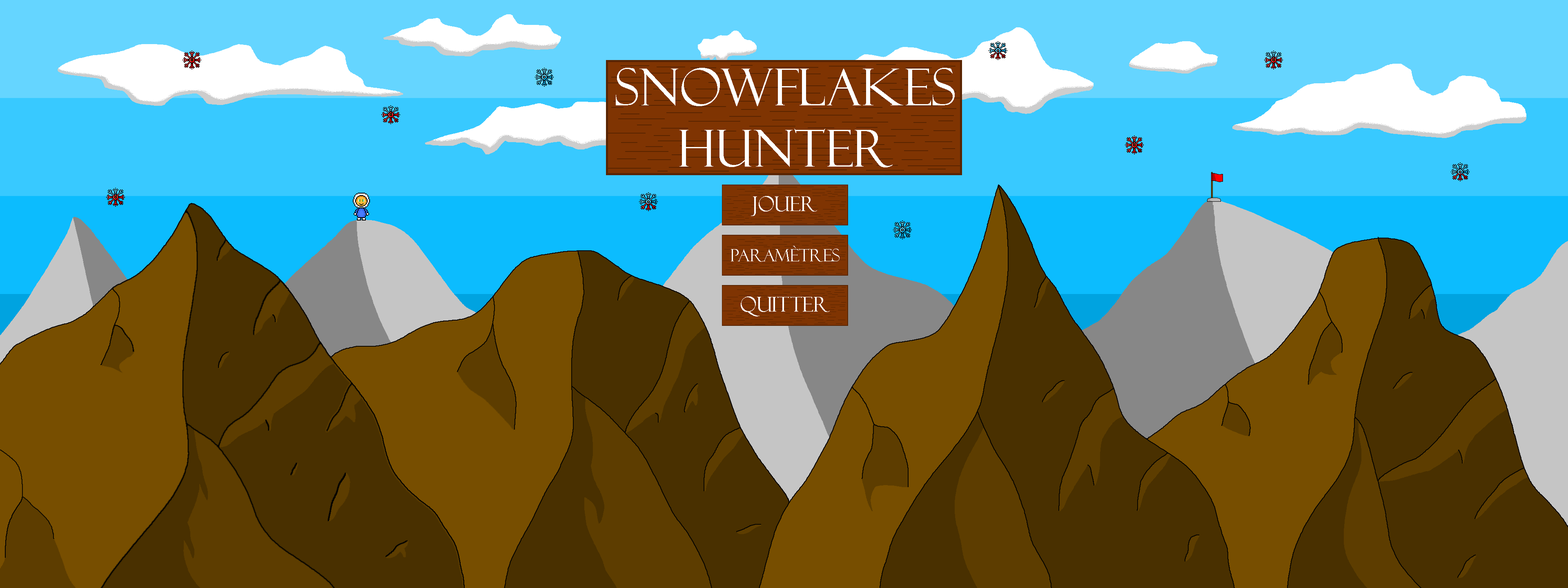
<style>
.page{position:relative;width:1568px;height:588px}
.page>*{position:absolute;margin:0}
.t1{font:51px "FelixTitlingMT";color:#ffffff}
.t2{font:20.4px "FelixTitlingMT";color:#ffffff}
.t3{font:17px "FelixTitlingMT";color:#ffffff}
</style>
<div class="page">
<p class="t1" style="left:616px;top:68px;width:339px;height:99px;text-align:center">Snowflakes<br>Hunter</p>
<p class="t2" style="left:751px;top:196px;width:66px;height:20px">Jouer</p>
<p class="t3" style="left:731px;top:246px;width:109px;height:16px">Paramètres</p>
<p class="t2" style="left:741px;top:296px;width:89px;height:20px">Quitter</p>
</div>
